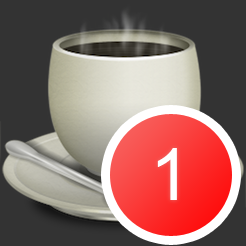
<style>
.page{position:relative;width:246px;height:246px;background:#333333}
.page>*{position:absolute;margin:0}
.t1{font:72px "ArialMT";color:#ffffff}
</style>
<div class="page">
<p class="t1" style="left:157px;top:148px;width:20px;height:52px">1</p>
</div>
